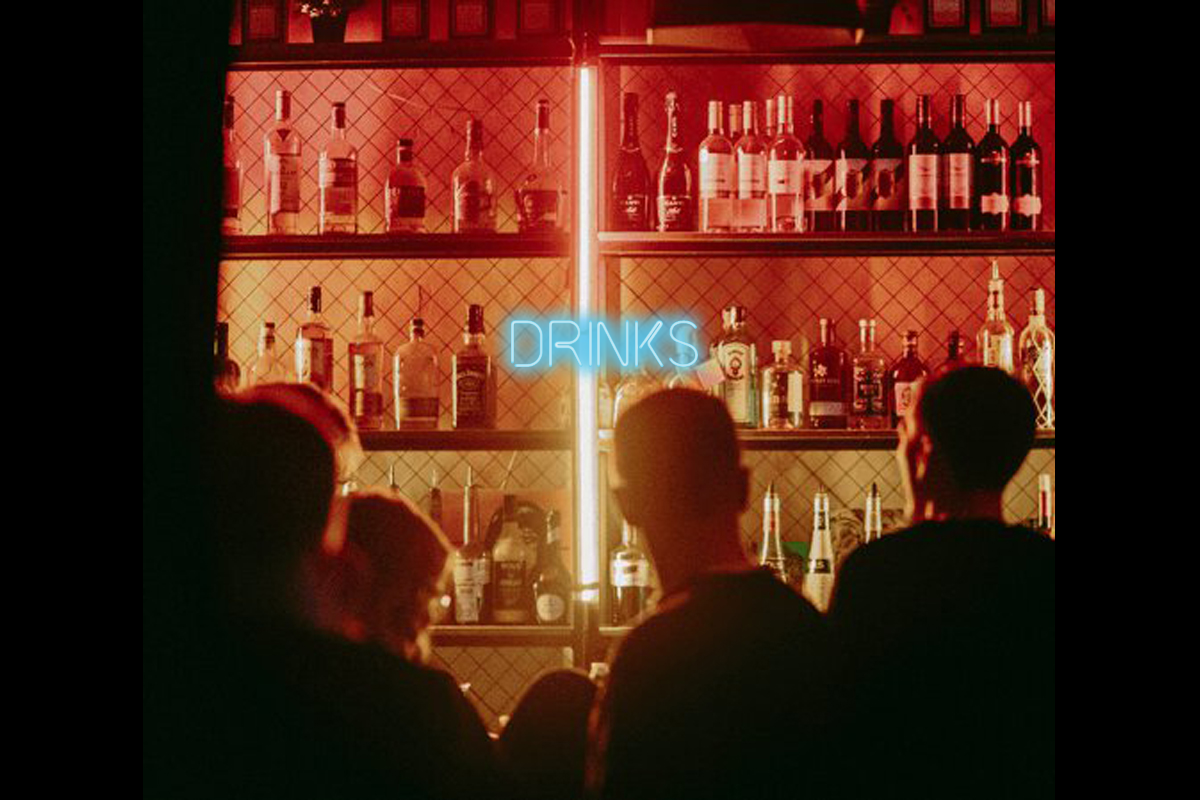
<style>
.page{position:relative;width:1200px;height:800px;background:#000000}
.page>*{position:absolute;margin:0}
.t1{font:58.3px "NeonTubes2-Regular";color:#b0e2f1}
</style>
<div class="page">
<p class="t1" style="left:511px;top:320px;width:187px;height:47px">DRINKS</p>
</div>
